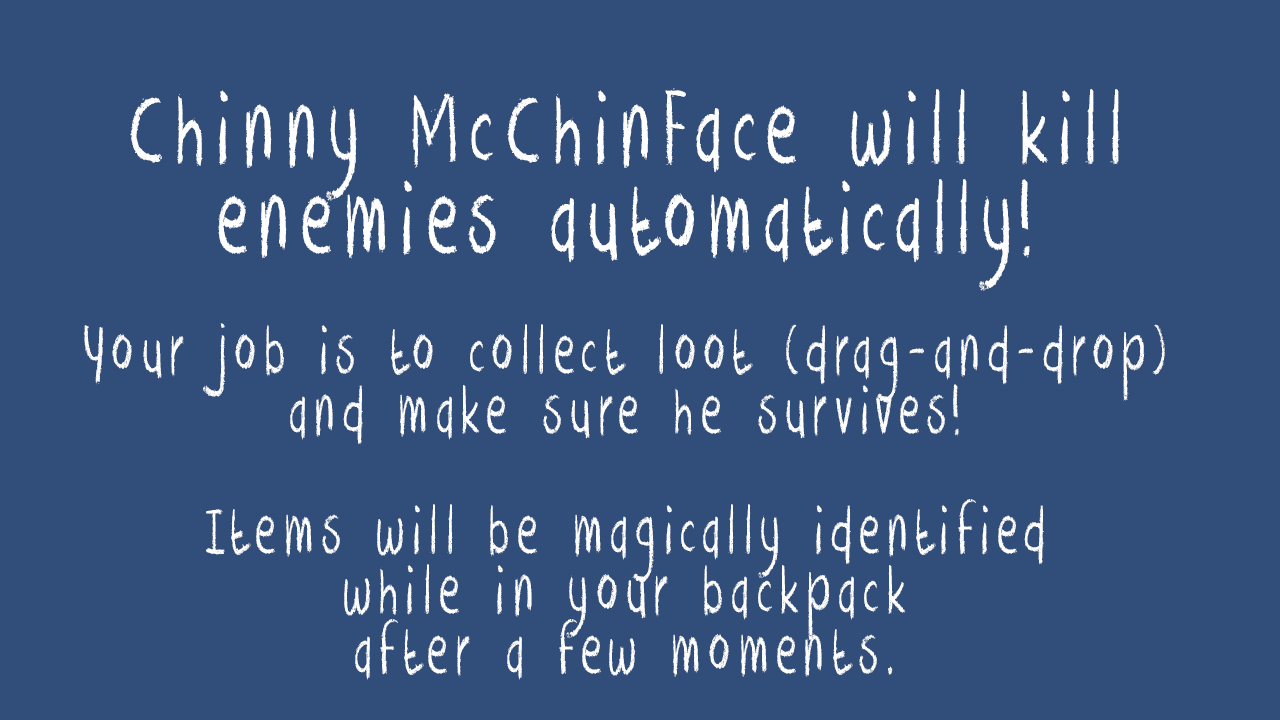
<style>
.page{position:relative;width:1280px;height:720px;background:#314d79}
.page>*{position:absolute;margin:0}
.t1{font:78.5px "DKCrayonCrumble";letter-spacing:0.159em;color:#ffffff;scale:0.64 1}
.t2{font:117.8px "DKCrayonCrumble";letter-spacing:0.159em;color:#ffffff;scale:0.64 1}
</style>
<div class="page">
<p class="t1" style="left:83px;top:88px;width:1082px;height:592px;text-align:center"><span class="t2">Chinny McChinFace will kill<br>enemies automatically!<br></span><br>Your job is to collect loot (drag-and-drop) and make sure he survives!<br><br>Items will be magically identified<br>while in your backpack<br>after a few moments.</p>
</div>
